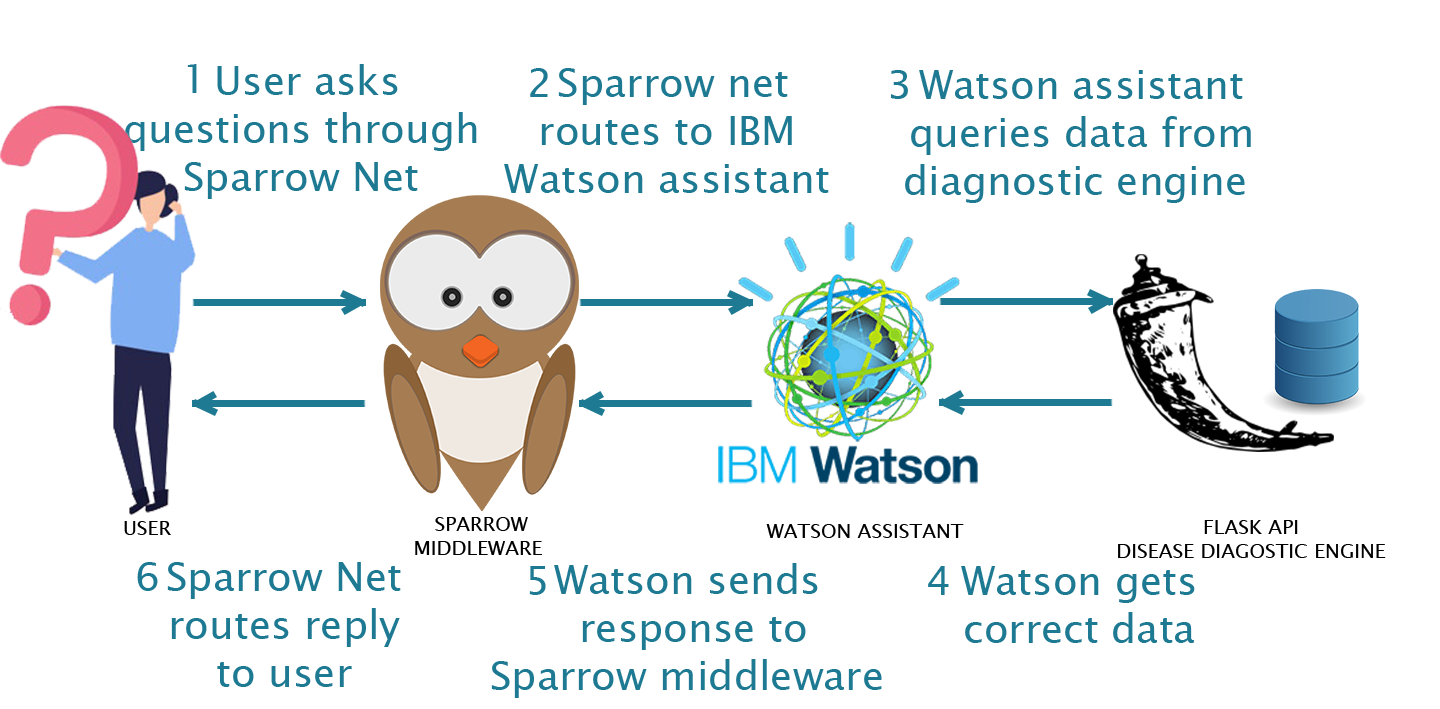
<style>
.page{position:relative;width:1440px;height:709px;background:#ffffff}
.page>*{position:absolute;margin:0}
.t1{font:40px "LucidaSansUnicode";color:#1e7a92}
.t2{font:20px "LucidaSansUnicode";color:#000000}
</style>
<div class="page">
<p class="t1" style="left:125px;top:64px;width:352px;height:135px;text-align:center">User asks <br>questions through<br>Sparrow Net</p>
<p class="t1" style="left:187px;top:64px;width:10px;height:29px">1</p>
<p class="t1" style="left:504px;top:68px;width:325px;height:125px;text-align:center">Sparrow net <br>routes to IBM<br>Watson assistant</p>
<p class="t1" style="left:530px;top:68px;width:18px;height:29px">2</p>
<p class="t1" style="left:891px;top:70px;width:17px;height:29px">3</p>
<p class="t1" style="left:905px;top:70px;width:346px;height:133px;text-align:center">Watson assistant <br>queries data from <br>diagnostic engine</p>
<p class="t2" style="left:124px;top:521px;width:47px;height:14px">USER</p>
<p class="t2" style="left:415px;top:517px;width:127px;height:38px;text-align:center">SPARROW <br>MIDDLEWARE</p>
<p class="t2" style="left:1118px;top:520px;width:268px;height:38px;text-align:center">FLASK API<br>DISEASE DIAGOSTIC ENGINE</p>
<p class="t2" style="left:766px;top:524px;width:198px;height:14px">WATSON ASSISTANT</p>
<p class="t1" style="left:137px;top:562px;width:21px;height:29px">6</p>
<p class="t1" style="left:167px;top:562px;width:234px;height:125px;text-align:center">Sparrow Net<br>routes reply<br>to user</p>
<p class="t1" style="left:491px;top:563px;width:391px;height:135px;text-align:center">Watson sends<br>response to <br>Sparrow middleware</p>
<p class="t1" style="left:529px;top:566px;width:17px;height:29px">5</p>
<p class="t1" style="left:928px;top:566px;width:21px;height:29px">4</p>
<p class="t1" style="left:961px;top:566px;width:234px;height:77px;text-align:center">Watson gets <br>correct data</p>
</div>
